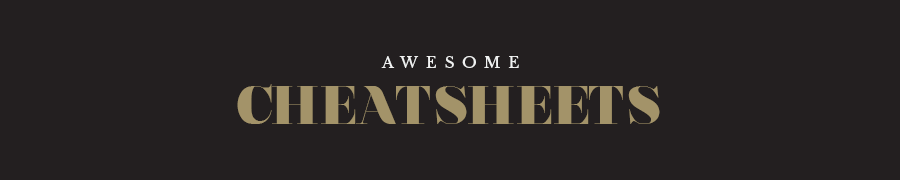
<style>
.page{position:relative;width:900px;height:180px;background:#231f20}
.page>*{position:absolute;margin:0}
.t1{font:15.3px "LibreBaskerville-Regular";letter-spacing:0.5em;color:#f1f2f2}
.t2{font:54.2px "NouvelleVague-Black";color:#a39369}
</style>
<div class="page">
<p class="t1" style="left:381px;top:56px;width:138px;height:12px">AWESOME</p>
<p class="t2" style="left:237px;top:84px;width:423px;height:40px">CHEATSHEETS</p>
</div>
